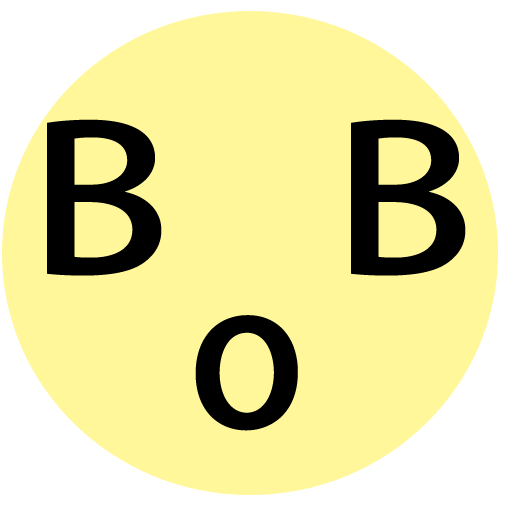
<style>
.page{position:relative;width:512px;height:512px;background:#fff799}
.page>*{position:absolute;margin:0}
.t1{font:200px "KozGoPr6N-Medium";color:#000000;scale:1.19 1}
.t2{font:200px "KozGoPr6N-Medium";color:#000000}
</style>
<div class="page">
<p class="t1" style="left:47px;top:119px;width:419px;height:157px">B   B</p>
<p class="t2" style="left:195px;top:315px;width:103px;height:116px">o</p>
</div>
